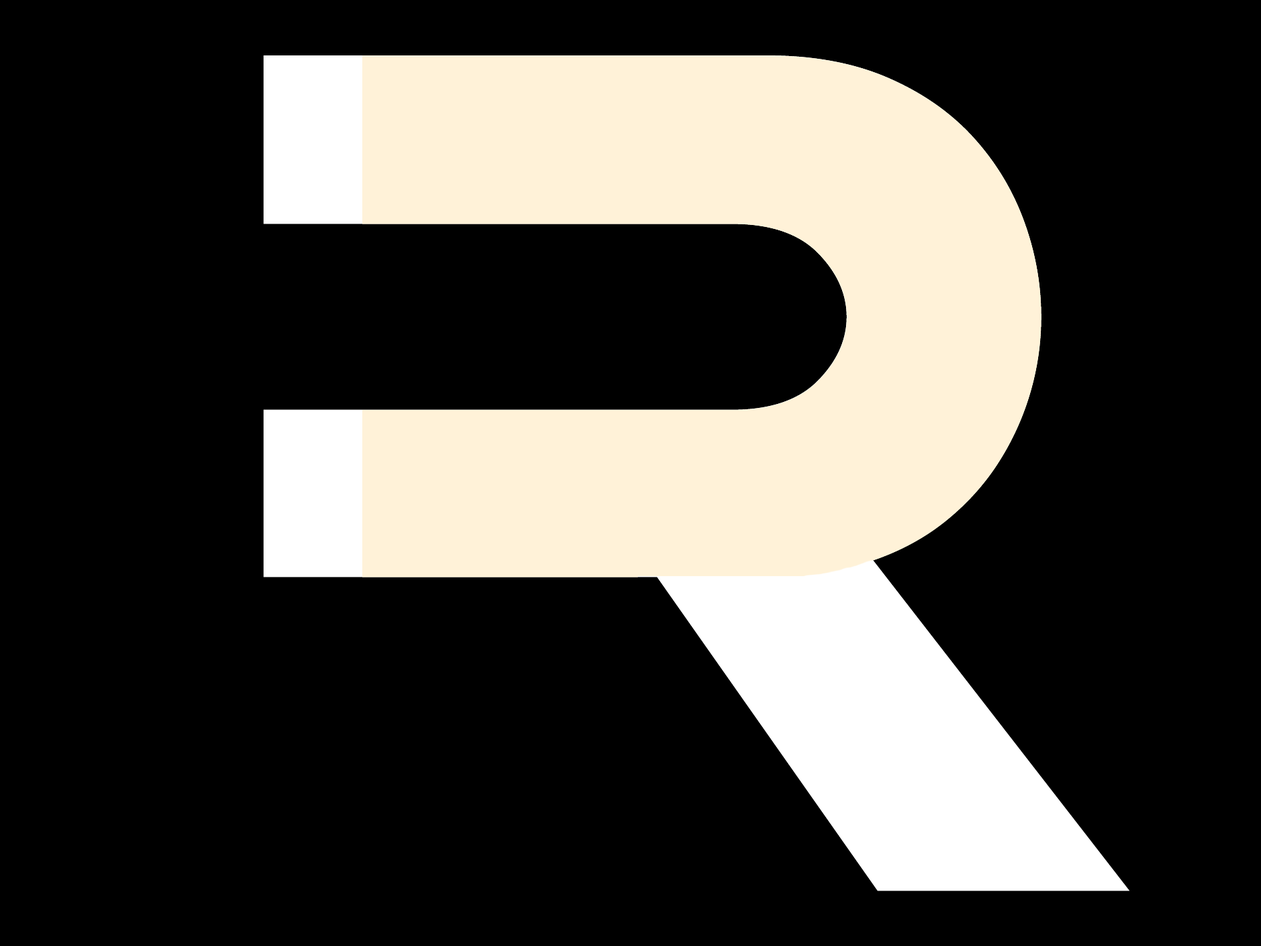
<style>
.page{position:relative;width:1261px;height:946px;background:#000000}
.page>*{position:absolute;margin:0}
.t1{font:1192.4px "Brolink-Regular"}
</style>
<div class="page">
<p class="t1" style="left:264px;top:55px;width:866px;height:836px">r</p>
</div>
